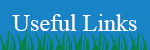
<style>
.page{position:relative;width:150px;height:50px;background:#1883c5}
.page>*{position:absolute;margin:0}
.t1{font:24px "TimesNewRomanPSMT";color:#ffffff}
</style>
<div class="page">
<p class="t1" style="left:12px;top:14px;width:125px;height:17px">Useful Links</p>
</div>
